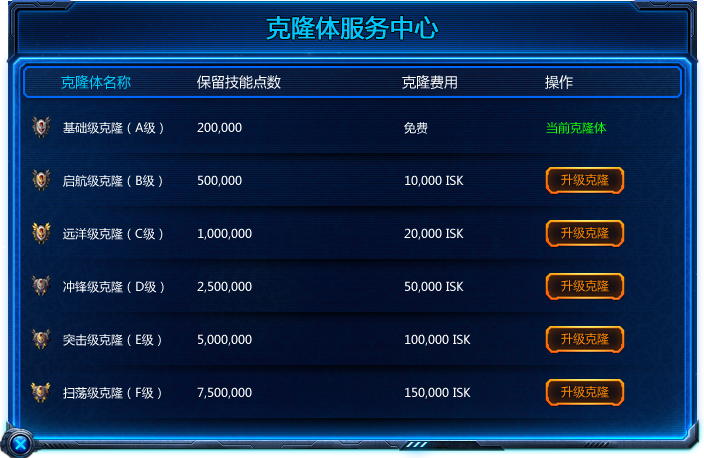
<style>
.page{position:relative;width:704px;height:458px}
.page>*{position:absolute;margin:0}
.t1{font:24px "MicrosoftYaHei";color:#00c6ff;font-weight:bold}
.t2{font:14px "MicrosoftYaHei";color:#00ccff}
.t3{font:14px "MicrosoftYaHei";color:#ffffff}
.t4{font:12px "MicrosoftYaHei";color:#ffffff}
.t5{font:12px "MicrosoftYaHei";color:#12ff00}
.t6{font:12px "MicrosoftYaHei";color:#ff8a00}
</style>
<div class="page">
<p class="t1" style="left:266px;top:15px;width:173px;height:25px">克隆体服务中心</p>
<p class="t2" style="left:61px;top:75px;width:70px;height:14px">克隆体名称</p>
<p class="t3" style="left:197px;top:75px;width:84px;height:14px">保留技能点数</p>
<p class="t3" style="left:402px;top:75px;width:55px;height:14px">克隆费用</p>
<p class="t3" style="left:545px;top:75px;width:28px;height:14px">操作</p>
<p class="t4" style="left:63px;top:122px;width:100px;height:12px">基础级克隆（A级）</p>
<p class="t4" style="left:197px;top:122px;width:45px;height:12px">200,000</p>
<p class="t4" style="left:404px;top:122px;width:24px;height:12px">免费</p>
<p class="t5" style="left:546px;top:122px;width:61px;height:12px">当前克隆体</p>
<p class="t4" style="left:63px;top:174px;width:99px;height:13px">启航级克隆（B级）</p>
<p class="t6" style="left:561px;top:174px;width:48px;height:12px">升级克隆</p>
<p class="t4" style="left:198px;top:175px;width:44px;height:12px">500,000</p>
<p class="t4" style="left:405px;top:175px;width:59px;height:12px">10,000 ISK</p>
<p class="t4" style="left:63px;top:228px;width:100px;height:12px">远洋级克隆（C级）</p>
<p class="t4" style="left:198px;top:228px;width:54px;height:12px">1,000,000</p>
<p class="t4" style="left:404px;top:228px;width:60px;height:12px">20,000 ISK</p>
<p class="t6" style="left:561px;top:227px;width:48px;height:12px">升级克隆</p>
<p class="t4" style="left:63px;top:280px;width:101px;height:13px">冲锋级克隆（D级）</p>
<p class="t4" style="left:197px;top:281px;width:55px;height:12px">2,500,000</p>
<p class="t4" style="left:405px;top:281px;width:59px;height:12px">50,000 ISK</p>
<p class="t6" style="left:561px;top:280px;width:48px;height:12px">升级克隆</p>
<p class="t4" style="left:63px;top:333px;width:98px;height:13px">突击级克隆（E级）</p>
<p class="t4" style="left:198px;top:334px;width:54px;height:12px">5,000,000</p>
<p class="t4" style="left:405px;top:334px;width:66px;height:12px">100,000 ISK</p>
<p class="t6" style="left:561px;top:333px;width:48px;height:12px">升级克隆</p>
<p class="t4" style="left:63px;top:387px;width:98px;height:12px">扫荡级克隆（F级）</p>
<p class="t4" style="left:197px;top:387px;width:55px;height:12px">7,500,000</p>
<p class="t4" style="left:405px;top:387px;width:66px;height:12px">150,000 ISK</p>
<p class="t6" style="left:561px;top:386px;width:48px;height:12px">升级克隆</p>
</div>
